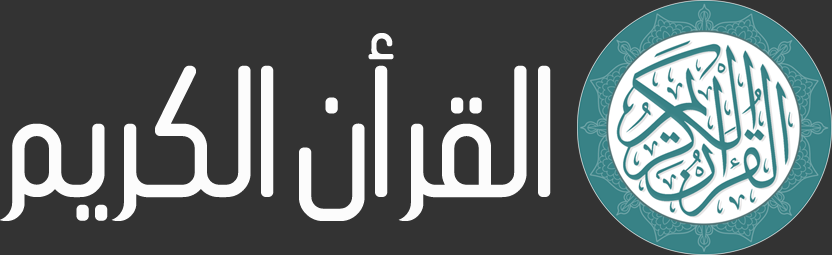
<style>
.page{position:relative;width:832px;height:255px;background:#333333}
.page>*{position:absolute;margin:0}
.t1{font:120px "AraAlharbiAlhanoof";color:#fcfcfc}
</style>
<div class="page">
<p class="t1" style="left:0px;top:33px;width:551px;height:188px">القرأن الكريم</p>
</div>
